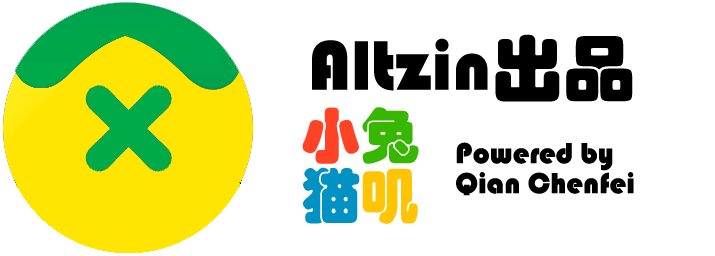
<style>
.page{position:relative;width:715px;height:256px;background:#ffffff}
.page>*{position:absolute;margin:0}
.t1{font:72px "STHupo";color:#000000}
.t2{font:60px/60px "STHupo";color:#ff4324}
.t3{font:60px/60px "STHupo";color:#37b700}
.t4{font:60px/60px "STHupo";color:#0092c3}
.t5{font:60px/60px "STHupo";color:#ffc505}
.t6{font:30px/30px "STHupo";color:#000000}
</style>
<div class="page">
<p class="t1" style="left:312px;top:34px;width:321px;height:68px">Altzin出品</p>
<p class="t2" style="left:302px;top:107px;width:117px;height:117px;text-align:center">小<span class="t3">兔<br></span><span class="t4">猫</span><span class="t5">叽</span></p>
<p class="t6" style="left:456px;top:142px;width:178px;height:54px">Powered by<br>Qian Chenfei</p>
</div>
